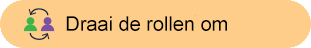
<style>
.page{position:relative;width:311px;height:48px;background:#fecd8a}
.page>*{position:absolute;margin:0}
.t1{font:19.9px "ArialMT";color:#000000}
</style>
<div class="page">
<p class="t1" style="left:66px;top:16px;width:161px;height:15px">Draai de rollen om</p>
</div>
